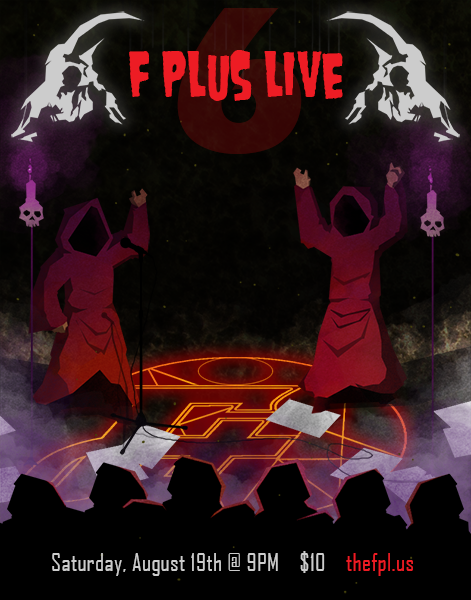
<style>
.page{position:relative;width:471px;height:600px}
.page>*{position:absolute;margin:0}
.t1{font:52px "Danzig4p";letter-spacing:0.015em;color:#ed1c24}
.t2{font:24px "AgencyFB-Reg";letter-spacing:0.015em;color:#cccccc}
.t3{font:24px "AgencyFB-Reg";letter-spacing:0.015em;color:#ed1c24}
</style>
<div class="page">
<p class="t1" style="left:129px;top:50px;width:214px;height:51px">f plus live</p>
<p class="t2" style="left:52px;top:551px;width:361px;height:25px">Saturday, August 19th @ 9PM    $10    <span class="t3">thefpl.us</span></p>
</div>
